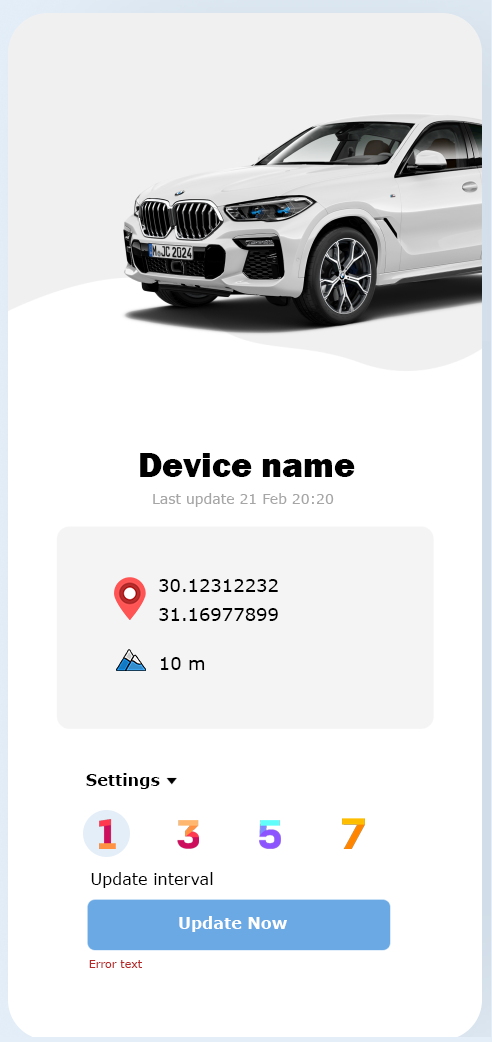
<style>
.page{position:relative;width:492px;height:1042px;background:#ffffff}
.page>*{position:absolute;margin:0}
.t1{font:36px "FranklinGothic-Heavy";color:#000000}
.t2{font:14px "Verdana";color:#a6a6a6}
.t3{font:18px "Verdana";color:#000000}
.t4{font:16px "Verdana-Bold";color:#000000}
.t5{font:16px "Verdana";color:#000000}
.t6{font:16px "Verdana-Bold";color:#ffffff}
.t7{font:11px "Verdana";color:#b62929}
</style>
<div class="page">
<p class="t1" style="left:140px;top:453px;width:215px;height:24px">Device name</p>
<p class="t2" style="left:153px;top:493px;width:181px;height:14px">Last update 21 Feb 20:20</p>
<p class="t3" style="left:159px;top:579px;width:119px;height:13px">30.12312232</p>
<p class="t3" style="left:159px;top:608px;width:119px;height:13px">31.16977899</p>
<p class="t3" style="left:161px;top:657px;width:44px;height:13px">10 m</p>
<p class="t4" style="left:86px;top:773px;width:74px;height:16px">Settings</p>
<p class="t5" style="left:91px;top:872px;width:122px;height:16px">Update interval</p>
<p class="t6" style="left:179px;top:916px;width:108px;height:16px">Update Now</p>
<p class="t7" style="left:89px;top:960px;width:53px;height:8px">Error text</p>
</div>
